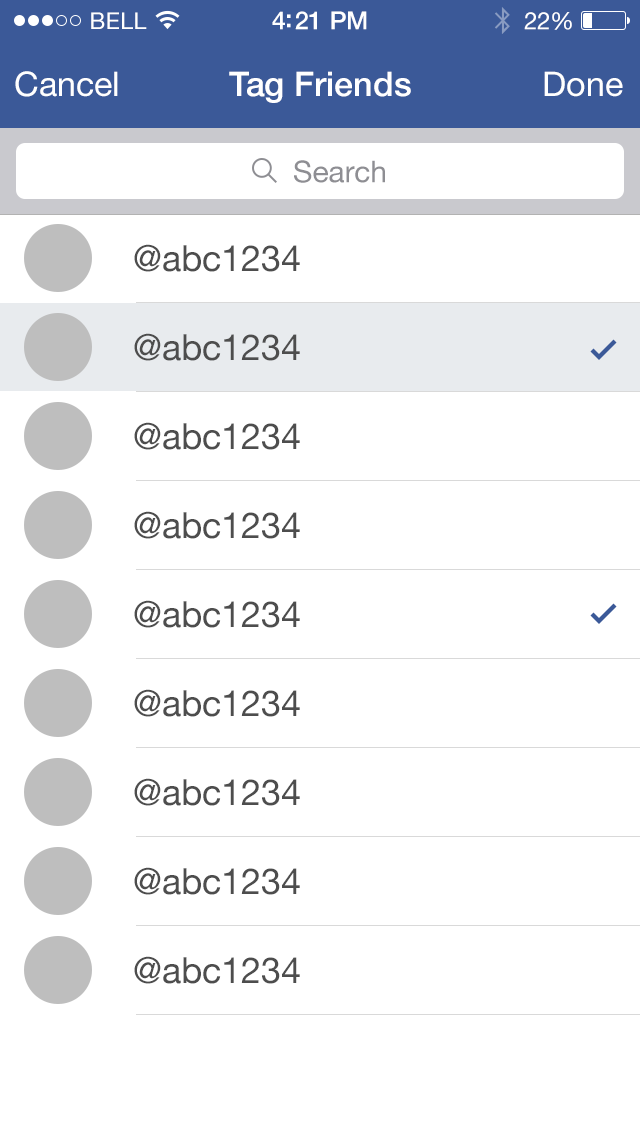
<style>
.page{position:relative;width:640px;height:1136px;background:#ffffff}
.page>*{position:absolute;margin:0}
.t1{font:23px "HelveticaNeue";letter-spacing:0.02em;color:#ffffff}
.t2{font:25px "HelveticaNeue-Medium";letter-spacing:-0.02em;color:#ffffff}
.t3{font:24px "HelveticaNeue";letter-spacing:-0.02em;color:#ffffff}
.t4{font:34px "HelveticaNeue";color:#ffffff}
.t5{font:34px "HelveticaNeue-Medium";color:#ffffff}
.t6{font:30px "HelveticaNeue";color:#8e8e93}
.t7{font:36px "HelveticaNeue";color:#4d4d4d}
</style>
<div class="page">
<p class="t1" style="left:91px;top:12px;width:56px;height:17px">BELL</p>
<p class="t2" style="left:272px;top:11px;width:95px;height:19px">4:21 PM</p>
<p class="t3" style="left:524px;top:12px;width:48px;height:18px">22%</p>
<p class="t4" style="left:15px;top:71px;width:103px;height:26px">Cancel</p>
<p class="t5" style="left:229px;top:71px;width:182px;height:32px">Tag Friends</p>
<p class="t4" style="left:544px;top:71px;width:79px;height:26px">Done</p>
<p class="t6" style="left:294px;top:160px;width:91px;height:23px">Search</p>
<p class="t7" style="left:134px;top:244px;width:166px;height:28px">@abc1234</p>
<p class="t7" style="left:134px;top:333px;width:166px;height:28px">@abc1234</p>
<p class="t7" style="left:134px;top:422px;width:166px;height:28px">@abc1234</p>
<p class="t7" style="left:134px;top:511px;width:166px;height:28px">@abc1234</p>
<p class="t7" style="left:134px;top:600px;width:166px;height:28px">@abc1234</p>
<p class="t7" style="left:134px;top:689px;width:166px;height:28px">@abc1234</p>
<p class="t7" style="left:134px;top:778px;width:166px;height:28px">@abc1234</p>
<p class="t7" style="left:134px;top:867px;width:166px;height:28px">@abc1234</p>
<p class="t7" style="left:134px;top:956px;width:166px;height:28px">@abc1234</p>
</div>
